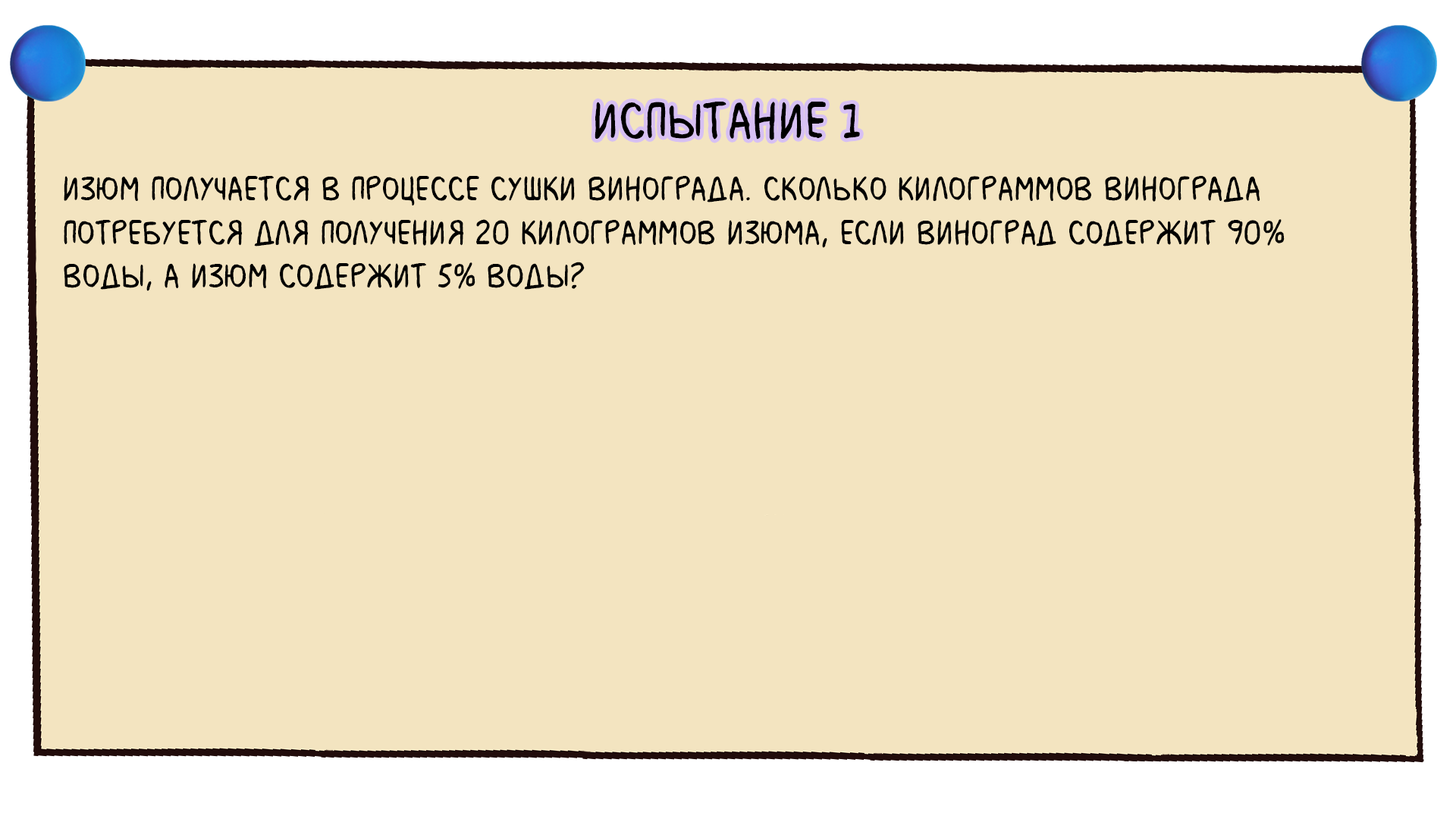
<style>
.page{position:relative;width:1456px;height:819px;background:#f3e4c0}
.page>*{position:absolute;margin:0}
.t1{font:54.6px "MilkMustacheBB";color:#000000}
.t2{font:36.4px "MilkMustacheBB";color:#000000}
</style>
<div class="page">
<p class="t1" style="left:595px;top:101px;width:265px;height:39px">испытание 1</p>
<p class="t2" style="left:64px;top:175px;width:1221px;height:116px">Изюм получается в процессе сушки винограда. Сколько килограммов винограда <br>потребуется для получения 20 килограммов изюма, если виноград содержит 90% <br>воды, а изюм содержит 5% воды?</p>
</div>
